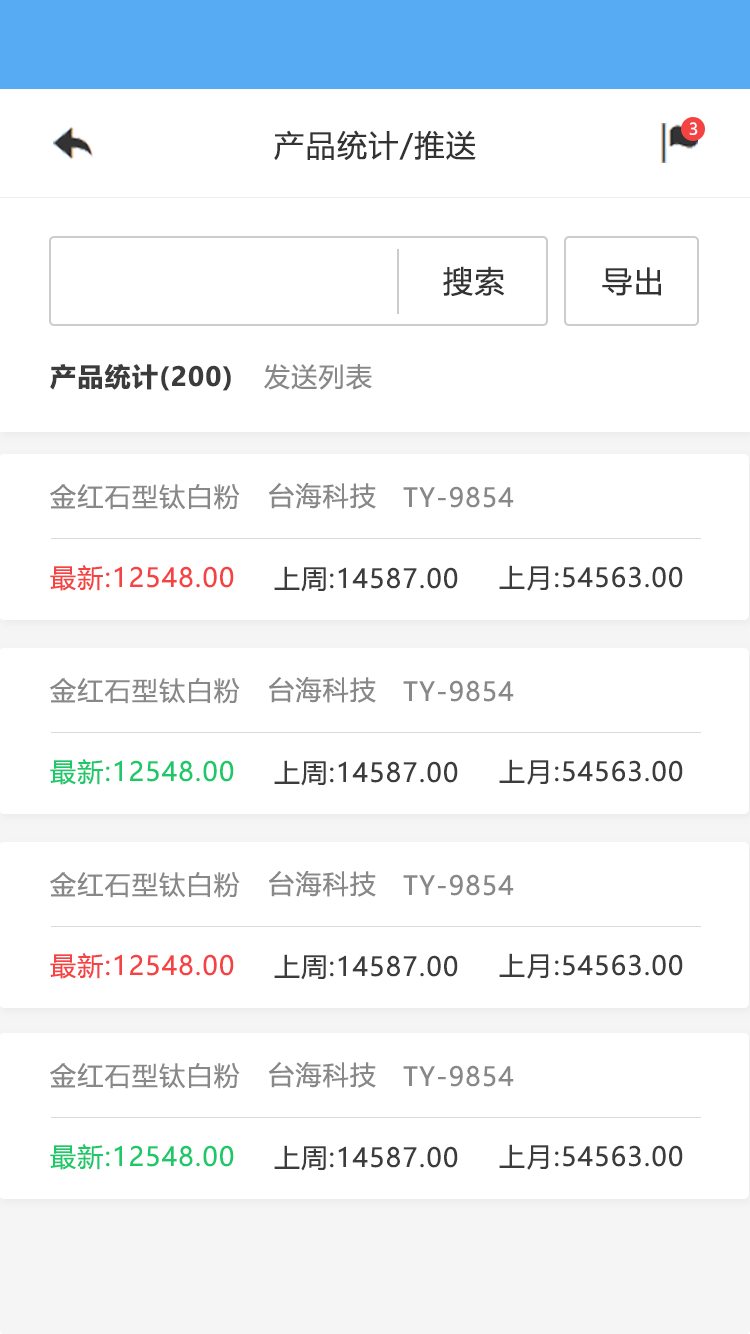
<style>
.page{position:relative;width:750px;height:1334px;background:#ffffff}
.page>*{position:absolute;margin:0}
.t1{font:16px "MicrosoftYaHeiUI";color:#ffffff}
.t2{font:30px "MicrosoftYaHeiUI";letter-spacing:0.05em;color:#333333}
.t3{font:26px "MicrosoftYaHeiUI-Bold";letter-spacing:0.05em;color:#3c3c3c}
.t4{font:26px "MicrosoftYaHeiUI";letter-spacing:0.05em;color:#888888}
.t5{font:26px "MicrosoftYaHeiUI";letter-spacing:0.05em;color:#f54343}
.t6{font:26px "MicrosoftYaHeiUI";letter-spacing:0.05em;color:#3c3c3c}
.t7{font:26px "MicrosoftYaHeiUI";letter-spacing:0.05em;color:#1dc869}
</style>
<div class="page">
<p class="t1" style="left:689px;top:122px;width:9px;height:13px">3</p>
<p class="t2" style="left:274px;top:130px;width:202px;height:30px">产品统计/推送</p>
<p class="t2" style="left:443px;top:266px;width:62px;height:30px">搜索</p>
<p class="t2" style="left:602px;top:267px;width:59px;height:29px">导出</p>
<p class="t3" style="left:50px;top:364px;width:181px;height:27px">产品统计(200)</p>
<p class="t4" style="left:264px;top:364px;width:108px;height:26px">发送列表</p>
<p class="t4" style="left:50px;top:484px;width:190px;height:26px">金红石型钛白粉</p>
<p class="t4" style="left:269px;top:483px;width:107px;height:26px">台海科技</p>
<p class="t4" style="left:403px;top:486px;width:111px;height:22px">TY-9854</p>
<p class="t5" style="left:50px;top:565px;width:184px;height:26px">最新:12548.00</p>
<p class="t6" style="left:274px;top:566px;width:184px;height:26px">上周:14587.00</p>
<p class="t6" style="left:499px;top:565px;width:184px;height:26px">上月:54563.00</p>
<p class="t4" style="left:50px;top:678px;width:190px;height:26px">金红石型钛白粉</p>
<p class="t4" style="left:269px;top:677px;width:107px;height:26px">台海科技</p>
<p class="t4" style="left:403px;top:680px;width:111px;height:22px">TY-9854</p>
<p class="t7" style="left:50px;top:759px;width:184px;height:26px">最新:12548.00</p>
<p class="t6" style="left:274px;top:760px;width:184px;height:26px">上周:14587.00</p>
<p class="t6" style="left:499px;top:759px;width:184px;height:26px">上月:54563.00</p>
<p class="t4" style="left:50px;top:872px;width:190px;height:26px">金红石型钛白粉</p>
<p class="t4" style="left:269px;top:871px;width:107px;height:26px">台海科技</p>
<p class="t4" style="left:403px;top:874px;width:111px;height:22px">TY-9854</p>
<p class="t5" style="left:50px;top:953px;width:184px;height:26px">最新:12548.00</p>
<p class="t6" style="left:499px;top:953px;width:184px;height:26px">上月:54563.00</p>
<p class="t6" style="left:274px;top:954px;width:184px;height:26px">上周:14587.00</p>
<p class="t4" style="left:269px;top:1062px;width:107px;height:26px">台海科技</p>
<p class="t4" style="left:50px;top:1063px;width:190px;height:26px">金红石型钛白粉</p>
<p class="t4" style="left:403px;top:1065px;width:111px;height:22px">TY-9854</p>
<p class="t7" style="left:50px;top:1144px;width:184px;height:26px">最新:12548.00</p>
<p class="t6" style="left:274px;top:1145px;width:184px;height:26px">上周:14587.00</p>
<p class="t6" style="left:499px;top:1144px;width:184px;height:26px">上月:54563.00</p>
</div>
